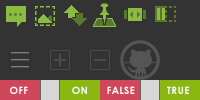
<style>
.page{position:relative;width:200px;height:100px;background:#333333}
.page>*{position:absolute;margin:0}
.t1{font:16.6px "CopperplateGothic-Bold";color:#59782d}
.t2{font:10px "CenturyGothic-Bold";letter-spacing:0.03em;color:#ffffff;text-transform:uppercase}
</style>
<div class="page">
<p class="t1" style="left:9px;top:13px;width:13px;height:3px">...</p>
<p class="t2" style="left:10px;top:86px;width:18px;height:8px">off</p>
<p class="t2" style="left:72px;top:86px;width:15px;height:8px">On</p>
<p class="t2" style="left:107px;top:86px;width:28px;height:8px">false</p>
<p class="t2" style="left:167px;top:86px;width:22px;height:8px">true</p>
</div>
